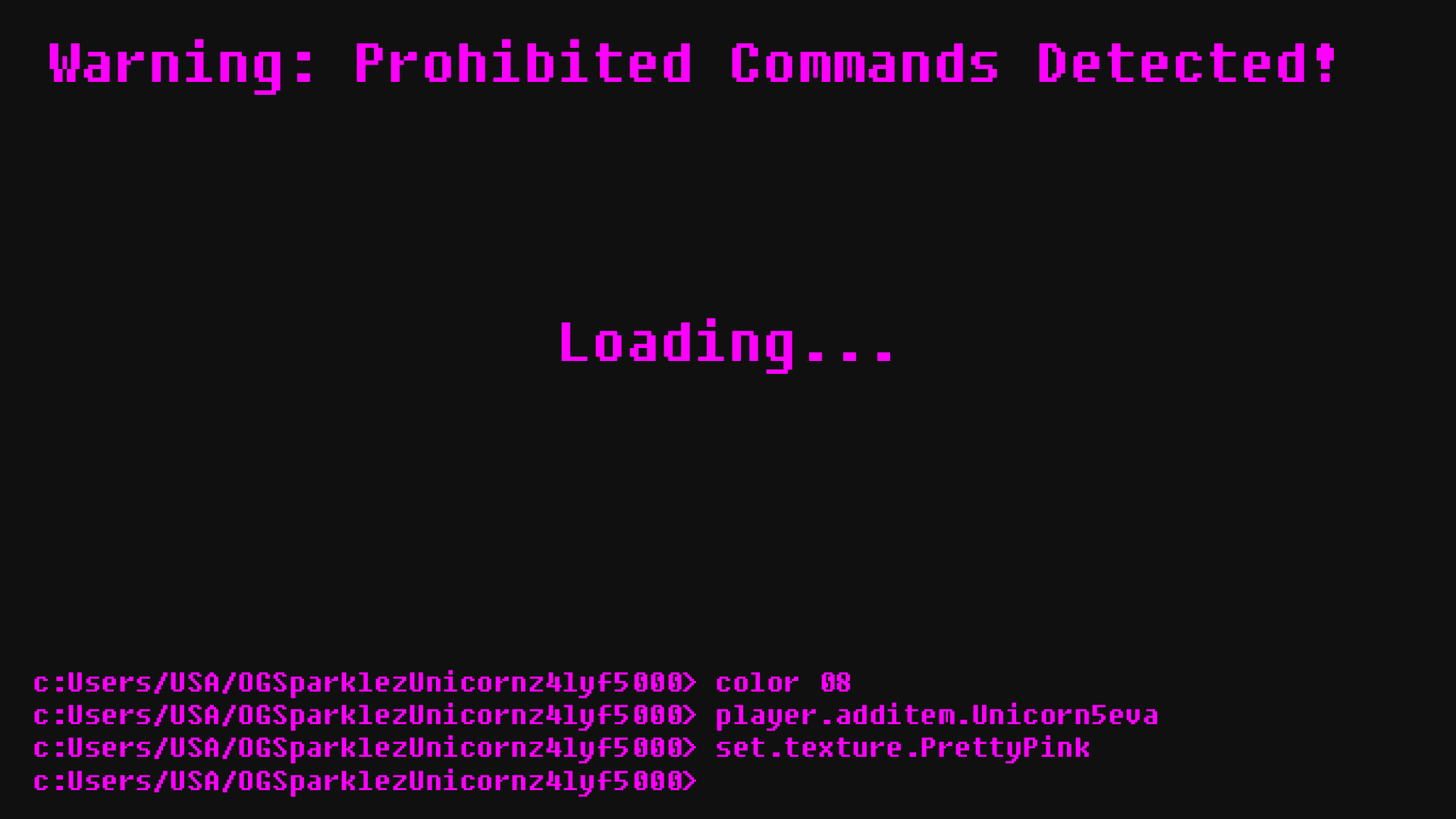
<style>
.page{position:relative;width:1456px;height:819px;background:#101010}
.page>*{position:absolute;margin:0}
.t1{font:54.6px "Fixedsys";color:#ff00ff}
.t2{font:27.3px "Fixedsys";color:#ff00ff}
</style>
<div class="page">
<p class="t1" style="left:49px;top:39px;width:1285px;height:56px">Warning: Prohibited Commands Detected!</p>
<p class="t1" style="left:561px;top:318px;width:329px;height:56px">Loading...</p>
<p class="t2" style="left:34px;top:670px;width:1123px;height:127px">c:Users/USA/OGSparklezUnicornz4lyf5000&gt; color 08<br>c:Users/USA/OGSparklezUnicornz4lyf5000&gt; player.additem.Unicorn5eva<br>c:Users/USA/OGSparklezUnicornz4lyf5000&gt; set.texture.PrettyPink<br>c:Users/USA/OGSparklezUnicornz4lyf5000&gt;</p>
</div>
